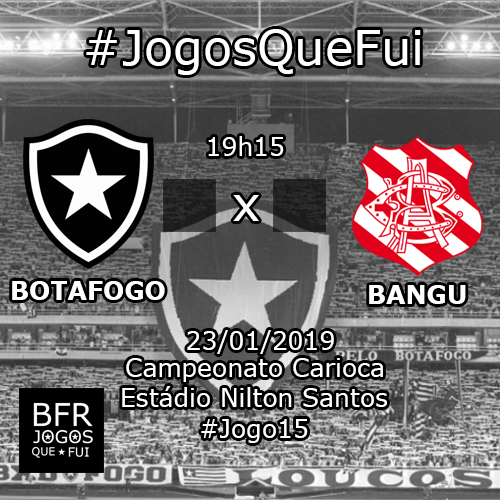
<style>
.page{position:relative;width:500px;height:500px}
.page>*{position:absolute;margin:0}
.t1{font:48px "Verdana";color:#ffffff}
.t2{font:25px "Verdana";color:#ffffff}
.t3{font:25px "Verdana-Bold";color:#ffffff}
</style>
<div class="page">
<p class="t1" style="left:86px;top:29px;width:335px;height:46px">#JogosQueFui</p>
<p class="t2" style="left:208px;top:136px;width:76px;height:20px">19h15</p>
<p class="t1" style="left:233px;top:195px;width:26px;height:26px">x</p>
<p class="t3" style="left:12px;top:281px;width:153px;height:19px">BOTAFOGO</p>
<p class="t3" style="left:369px;top:285px;width:97px;height:19px">BANGU</p>
<p class="t2" style="left:187px;top:330px;width:147px;height:24px">23/01/2019</p>
<p class="t2" style="left:126px;top:358px;width:257px;height:24px">Campeonato Carioca</p>
<p class="t2" style="left:122px;top:386px;width:265px;height:21px">Estádio Nilton Santos</p>
<p class="t2" style="left:201px;top:419px;width:107px;height:24px">#Jogo15</p>
</div>
